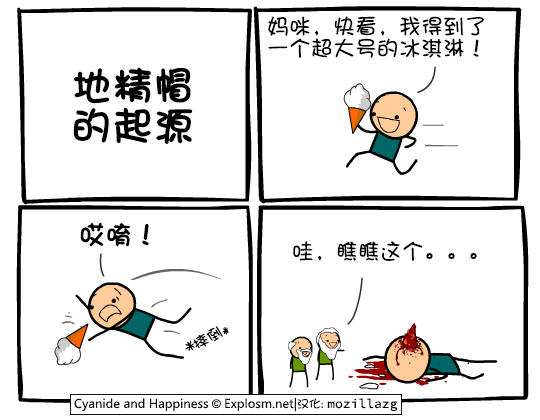
<style>
.page{position:relative;width:540px;height:420px;background:#ffffff}
.page>*{position:absolute;margin:0}
.t1{font:22px/22px "DFShaoNvW5";color:#000000}
.t2{font:40px/40px "DFGirl";color:#000000;font-weight:bold}
.t3{font:26px "DFShaoNvW5";color:#000000;font-weight:bold}
.t4{font:22px "DFShaoNvW5";color:#000000}
.t5{font:15px "DFShaoNvW5";color:#000000;scale:1.04 1}
</style>
<div class="page">
<p class="t1" style="left:268px;top:16px;width:216px;height:42px">妈咪，快看，我得到了<br>一个超大号的冰淇淋！</p>
<p class="t2" style="left:73px;top:67px;width:120px;height:77px">地精帽<br>的起源</p>
<p class="t3" style="left:80px;top:222px;width:69px;height:25px">哎唷！</p>
<p class="t4" style="left:293px;top:241px;width:184px;height:20px">哇，瞧瞧这个。。。</p>
<p class="t5" style="left:193px;top:326px;width:30px;height:23px;rotate:-29deg">摔倒</p>
</div>
